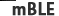
<style>
.page{position:relative;width:59px;height:16px;background:#ffffff}
.page>*{position:absolute;margin:0}
.t1{font:16px "AdobeGothicStd-Bold";color:#303030;font-weight:bold}
</style>
<div class="page">
<p class="t1" style="left:12px;top:2px;width:43px;height:14px">mBLE</p>
</div>
